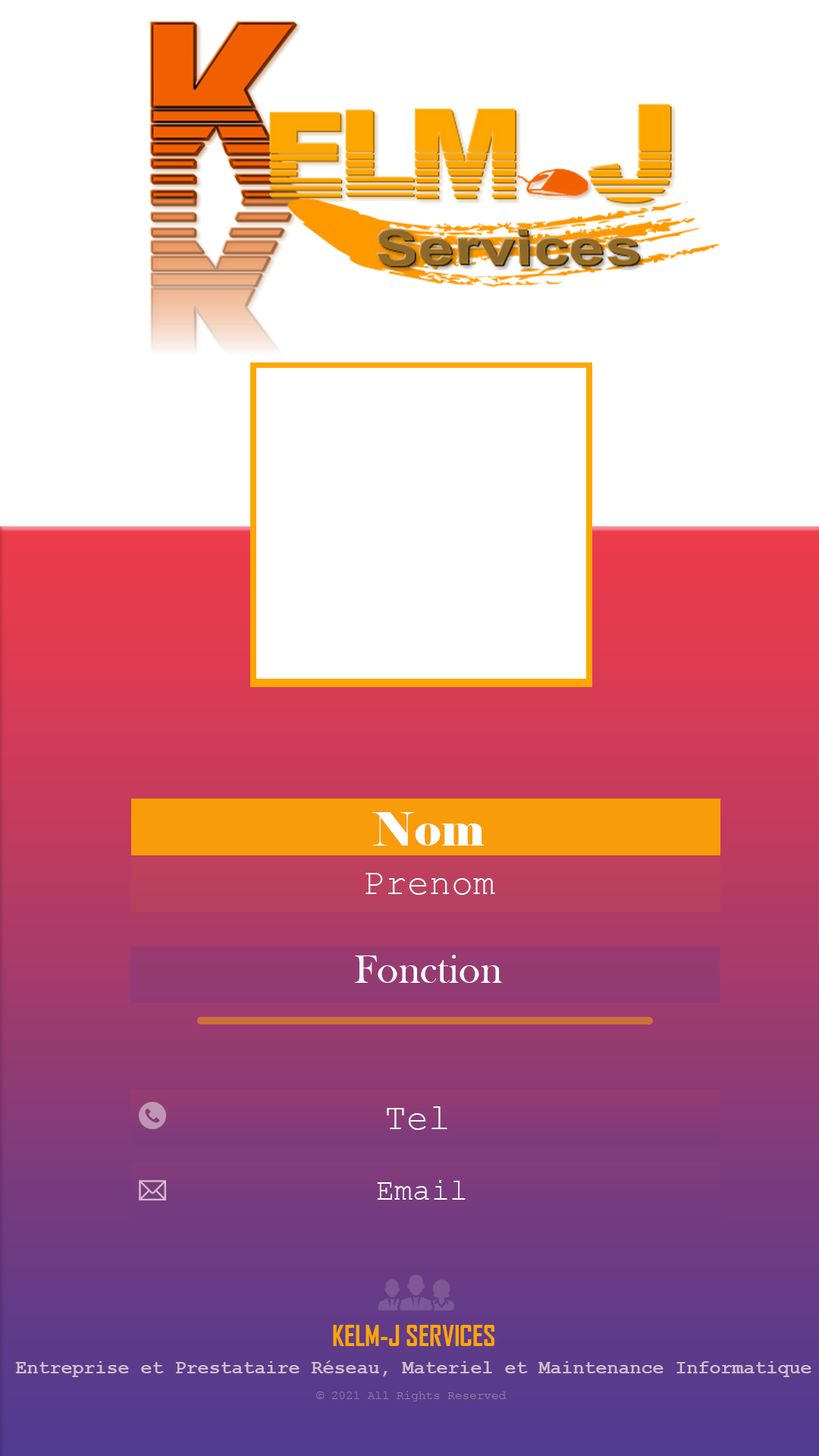
<style>
.page{position:relative;width:819px;height:1456px;background:#ffffff}
.page>*{position:absolute;margin:0}
.t1{font:45.5px "Elephant-Regular";letter-spacing:0.01em;color:#ffffff}
.t2{font:36.4px "CourierNewPSMT";letter-spacing:0.005em;color:#ffffff}
.t3{font:40.9px "BaskOldFace";letter-spacing:0.01em;color:#ffffff}
.t4{font:30.3px "CourierNewPSMT";letter-spacing:0.005em;color:#ffffff}
.t5{font:27.3px "AgencyFB-Bold";color:#fea600}
.t6{font:19px "CourierNewPS-BoldMT";color:#ebbfdf}
.t7{font:12.1px "CourierNewPSMT";color:#957aa7}
</style>
<div class="page">
<p class="t1" style="left:372px;top:812px;width:113px;height:34px">Nom</p>
<p class="t2" style="left:366px;top:873px;width:129px;height:22px">Prenom</p>
<p class="t3" style="left:355px;top:955px;width:147px;height:28px">Fonction</p>
<p class="t2" style="left:387px;top:1106px;width:60px;height:24px">Tel</p>
<p class="t4" style="left:377px;top:1180px;width:89px;height:20px">Email</p>
<p class="t5" style="left:333px;top:1325px;width:161px;height:21px">KELM-J SERVICES</p>
<p class="t6" style="left:15px;top:1360px;width:796px;height:17px">Entreprise et Prestataire Réseau, Materiel et Maintenance Informatique</p>
<p class="t7" style="left:316px;top:1391px;width:190px;height:10px">© 2021 All Rights Reserved</p>
</div>
